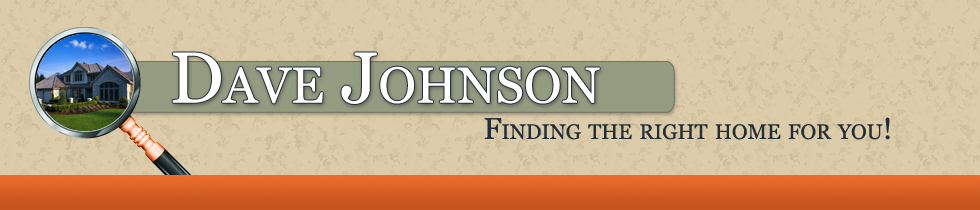
<style>
.page{position:relative;width:980px;height:210px;background:#ddcca9}
.page>*{position:absolute;margin:0}
.t1{font:72px "Georgia";color:#ffffff;font-variant:small-caps}
.t2{font:30px "Georgia";color:#222f38;font-variant:small-caps}
</style>
<div class="page">
<p class="t1" style="left:172px;top:52px;width:428px;height:52px">Dave Johnson</p>
<p class="t2" style="left:484px;top:117px;width:406px;height:23px">Finding the right home for you!</p>
</div>
